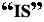
<style>
.page{position:relative;width:44px;height:22px;background:#ffffff}
.page>*{position:absolute;margin:0}
.t1{font:18px "TimesNewRomanPS-BoldMT";color:#000000}
</style>
<div class="page">
<p class="t1" style="left:14px;top:4px;width:17px;height:14px">IS</p>
</div>
